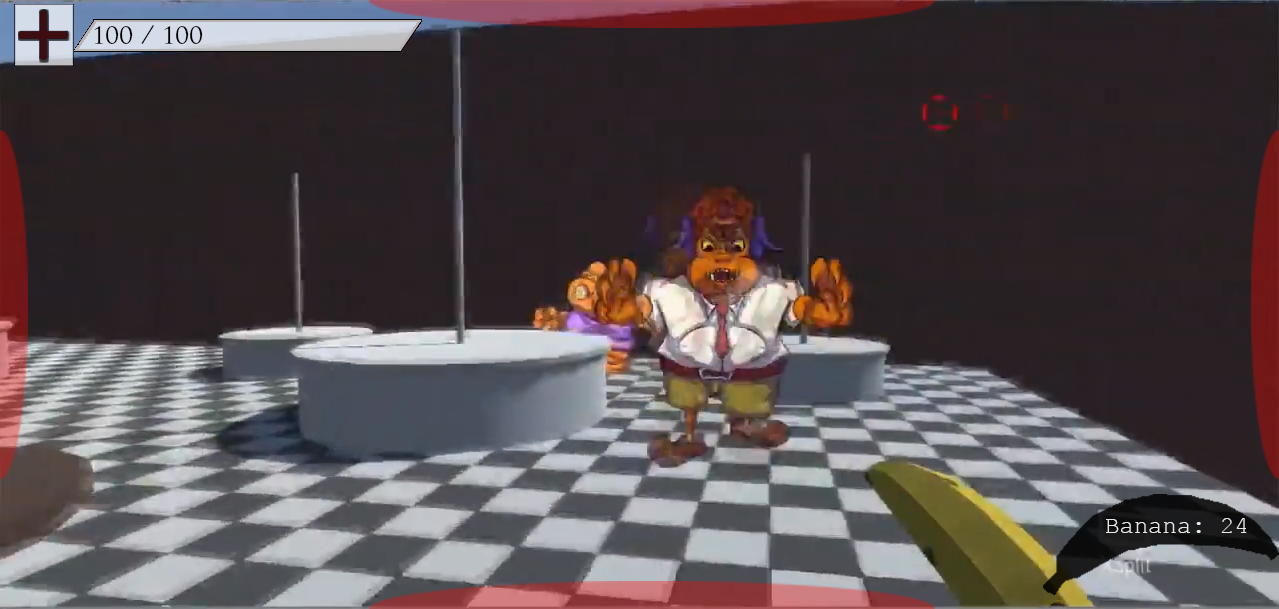
<style>
.page{position:relative;width:1279px;height:609px}
.page>*{position:absolute;margin:0}
.t1{font:24px "TrajanPro-Regular";color:#000000}
.t2{font:24px "CourierNewPSMT";color:#ffffff}
</style>
<div class="page">
<p class="t1" style="left:94px;top:25px;width:109px;height:19px">100 / 100</p>
<p class="t2" style="left:1106px;top:518px;width:141px;height:15px;opacity:0.86">Banana: 24</p>
</div>
